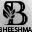
<style>
.page{position:relative;width:32px;height:32px}
.page>*{position:absolute;margin:0}
.t1{font:7.1px "MyriadPro-Regular";color:#000000}
</style>
<div class="page">
<p class="t1" style="left:0px;top:27px;width:32px;height:6px">BHEESHMA</p>
</div>
